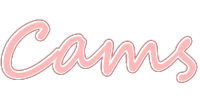
<style>
.page{position:relative;width:200px;height:100px;background:#ffffff}
.page>*{position:absolute;margin:0}
.t1{font:72px "SegoeScript";color:#ffb9b9}
</style>
<div class="page">
<p class="t1" style="left:3px;top:22px;width:193px;height:59px">Cams</p>
</div>
